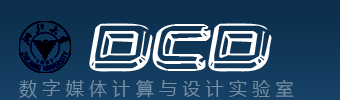
<style>
.page{position:relative;width:340px;height:100px}
.page>*{position:absolute;margin:0}
.t1{font:58px "Neurochrome";color:#ffffff}
.t2{font:18px "MicrosoftYaHei";color:#738ca1}
</style>
<div class="page">
<p class="t1" style="left:89px;top:23px;width:183px;height:49px">DCD</p>
<p class="t2" style="left:19px;top:79px;width:275px;height:19px">数 字 媒 体 计 算 与 设 计 实 验 室</p>
</div>
